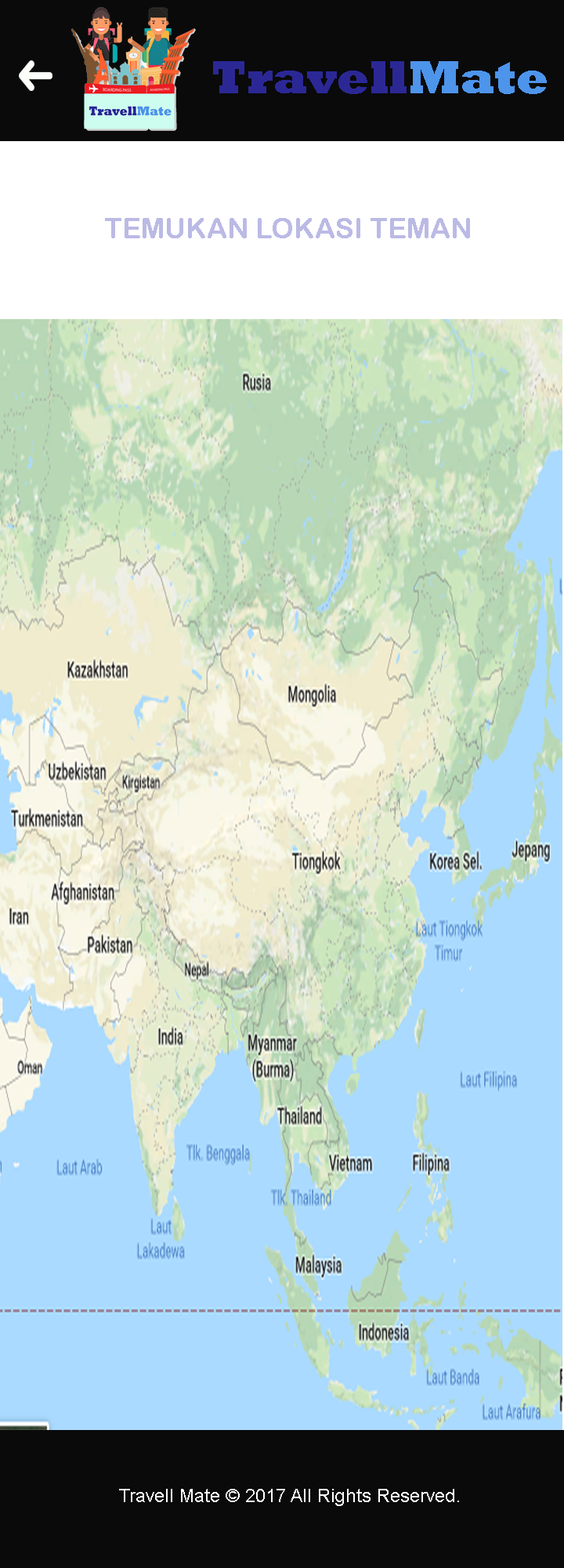
<style>
.page{position:relative;width:564px;height:1568px;background:#aadaff}
.page>*{position:absolute;margin:0}
.t1{font:47px "Rockwell-ExtraBold";color:#2b2896}
.t2{font:47px "Rockwell-ExtraBold";color:#4d94eb}
.t3{font:28.2px "ArialRoundedMTBold";color:#bbbae5}
.t4{font:18.8px "ArialMT";color:#ffffff}
</style>
<div class="page">
<p class="t1" style="left:213px;top:61px;width:334px;height:33px">Travell<span class="t2">Mate</span></p>
<p class="t3" style="left:105px;top:218px;width:365px;height:20px">TEMUKAN LOKASI TEMAN</p>
<p class="t4" style="left:119px;top:1489px;width:340px;height:17px">Travell Mate © 2017 All Rights Reserved.</p>
</div>
